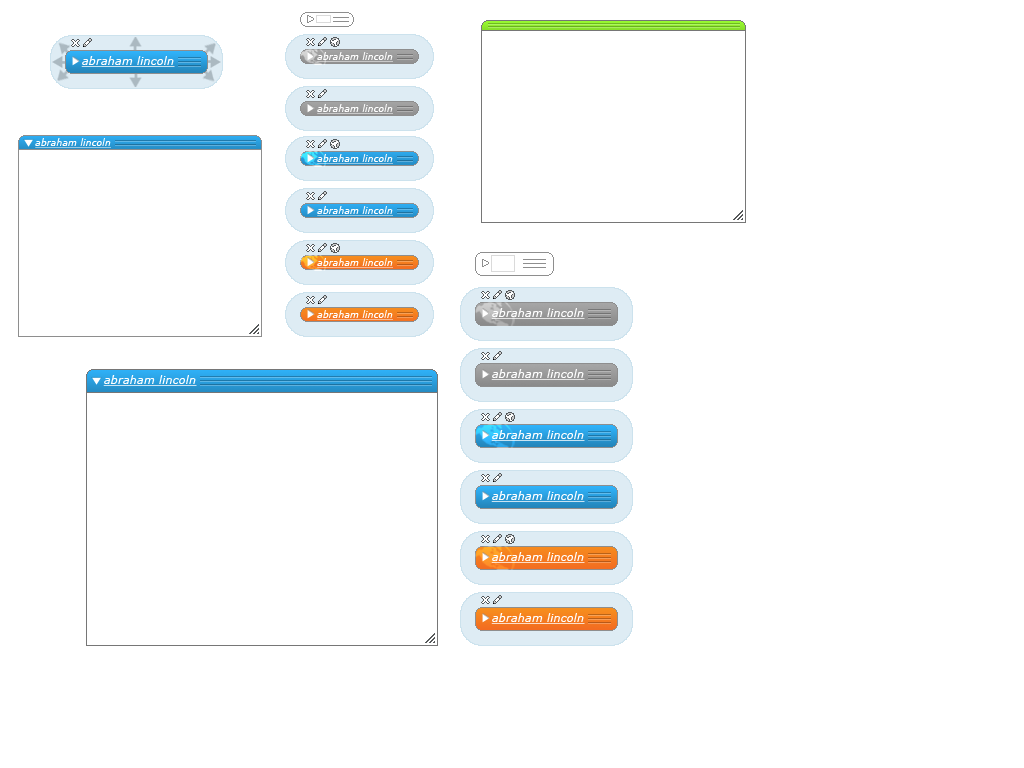
<style>
.page{position:relative;width:1024px;height:768px;background:#ffffff}
.page>*{position:absolute;margin:0}
.t1{font:9px "Verdana-Italic";letter-spacing:0.025em;color:#ffffff;text-decoration:underline}
.t2{font:11px "Verdana-Italic";letter-spacing:0.025em;color:#ffffff;text-decoration:underline}
</style>
<div class="page">
<p class="t1" style="left:317px;top:52px;width:76px;height:10px">abraham lincoln</p>
<p class="t2" style="left:81px;top:56px;width:94px;height:11px">abraham lincoln</p>
<p class="t1" style="left:317px;top:104px;width:76px;height:10px">abraham lincoln</p>
<p class="t1" style="left:35px;top:138px;width:76px;height:10px">abraham lincoln</p>
<p class="t1" style="left:317px;top:154px;width:76px;height:10px">abraham lincoln</p>
<p class="t1" style="left:317px;top:206px;width:76px;height:10px">abraham lincoln</p>
<p class="t1" style="left:317px;top:258px;width:76px;height:10px">abraham lincoln</p>
<p class="t1" style="left:317px;top:310px;width:76px;height:10px">abraham lincoln</p>
<p class="t2" style="left:491px;top:308px;width:94px;height:11px">abraham lincoln</p>
<p class="t2" style="left:103px;top:375px;width:94px;height:11px">abraham lincoln</p>
<p class="t2" style="left:491px;top:369px;width:94px;height:11px">abraham lincoln</p>
<p class="t2" style="left:491px;top:430px;width:94px;height:11px">abraham lincoln</p>
<p class="t2" style="left:491px;top:491px;width:94px;height:11px">abraham lincoln</p>
<p class="t2" style="left:491px;top:552px;width:94px;height:11px">abraham lincoln</p>
<p class="t2" style="left:491px;top:613px;width:94px;height:11px">abraham lincoln</p>
</div>
